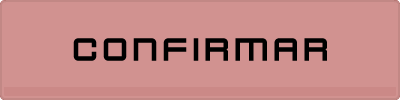
<style>
.page{position:relative;width:400px;height:100px;background:#d19290}
.page>*{position:absolute;margin:0}
.t1{font:36px "KenVector-Future";color:#000000}
</style>
<div class="page">
<p class="t1" style="left:73px;top:38px;width:254px;height:23px">confirmar</p>
</div>
